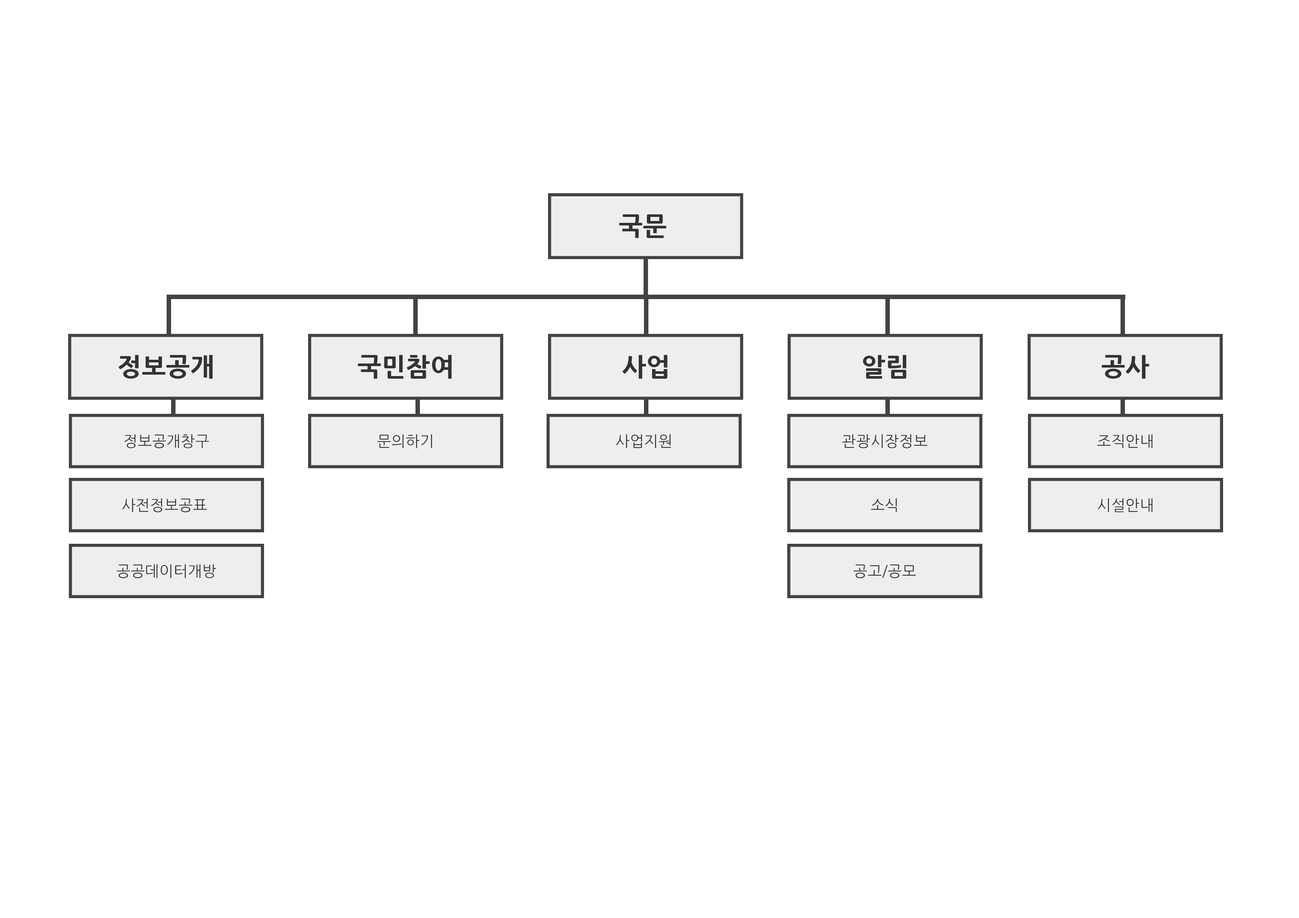
<style>
.page{position:relative;width:1299px;height:918px;background:#ffffff}
.page>*{position:absolute;margin:0}
.t1{font:25.5px "NanumGothicExtraBold";letter-spacing:0.01em;color:#333333}
.t2{font:15.1px "NanumGothic";letter-spacing:0.01em;color:#333333}
</style>
<div class="page">
<p class="t1" style="left:619px;top:214px;width:47px;height:24px">국문</p>
<p class="t1" style="left:118px;top:355px;width:95px;height:24px">정보공개</p>
<p class="t1" style="left:358px;top:355px;width:94px;height:24px">국민참여</p>
<p class="t1" style="left:622px;top:355px;width:46px;height:24px">사업</p>
<p class="t1" style="left:863px;top:355px;width:43px;height:24px">알림</p>
<p class="t1" style="left:1101px;top:355px;width:48px;height:24px">공사</p>
<p class="t2" style="left:124px;top:434px;width:85px;height:14px">정보공개창구</p>
<p class="t2" style="left:377px;top:434px;width:55px;height:14px">문의하기</p>
<p class="t2" style="left:616px;top:434px;width:55px;height:14px">사업지원</p>
<p class="t2" style="left:842px;top:434px;width:85px;height:14px">관광시장정보</p>
<p class="t2" style="left:1097px;top:434px;width:55px;height:14px">조직안내</p>
<p class="t2" style="left:122px;top:498px;width:85px;height:14px">사전정보공표</p>
<p class="t2" style="left:871px;top:498px;width:26px;height:14px">소식</p>
<p class="t2" style="left:1097px;top:498px;width:55px;height:14px">시설안내</p>
<p class="t2" style="left:117px;top:564px;width:99px;height:14px">공공데이터개방</p>
<p class="t2" style="left:853px;top:565px;width:63px;height:13px">공고/공모</p>
</div>
